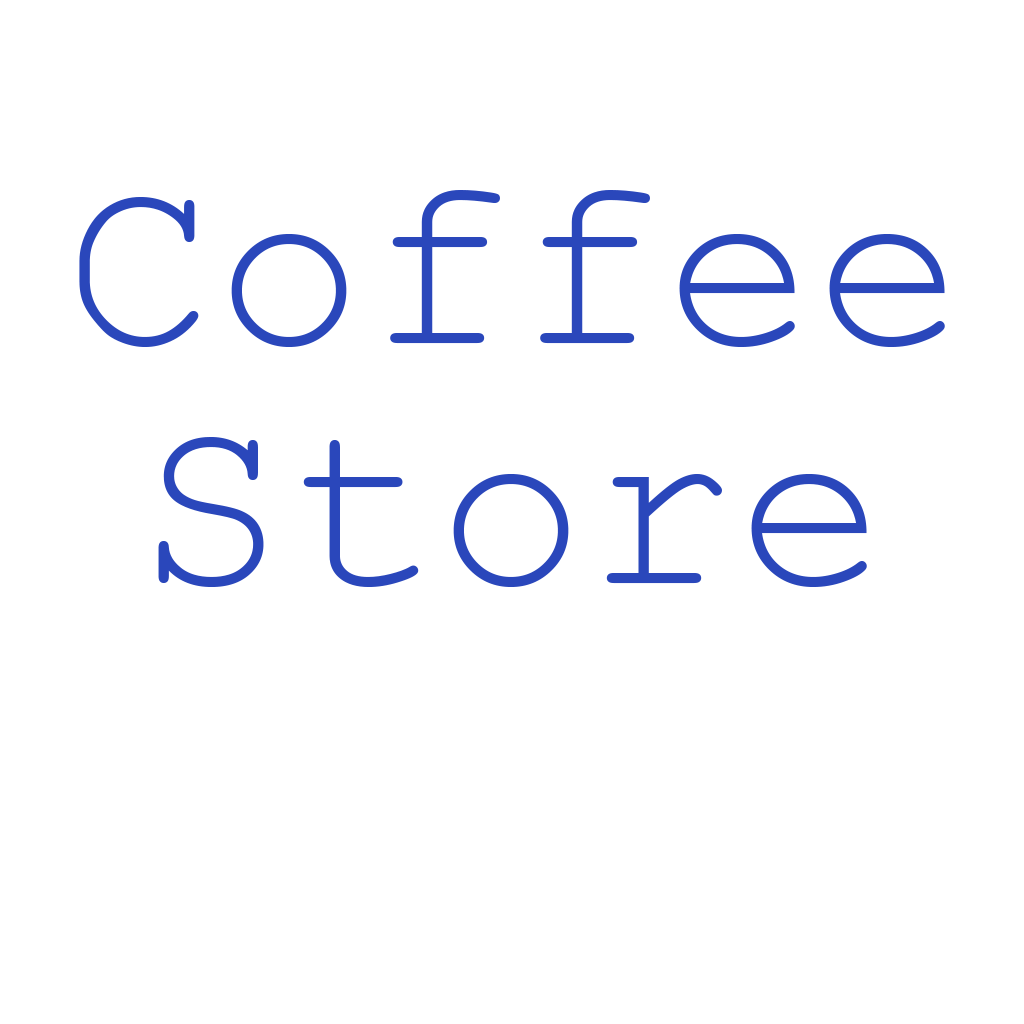
<style>
.page{position:relative;width:1024px;height:1024px;background:#ffffff}
.page>*{position:absolute;margin:0}
.t1{font:250px "CourierNewPSMT";color:#2a47bb}
</style>
<div class="page">
<p class="t1" style="left:79px;top:190px;width:866px;height:157px">Coffee</p>
<p class="t1" style="left:158px;top:437px;width:709px;height:150px">Store</p>
</div>
